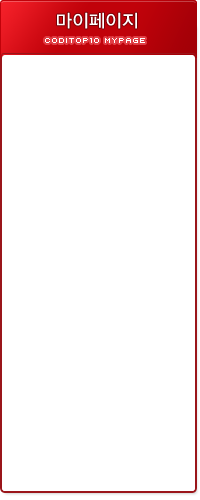
<style>
.page{position:relative;width:200px;height:500px;background:#ffffff}
.page>*{position:absolute;margin:0}
.t1{font:18px "YDIYGO330";color:#ffffff}
.t2{font:8px "Kroeger0554";color:#ffffff}
</style>
<div class="page">
<p class="t1" style="left:57px;top:12px;width:80px;height:17px">마이페이지</p>
<p class="t2" style="left:45px;top:38px;width:100px;height:5px">CODITOP10 MYPAGE</p>
</div>
